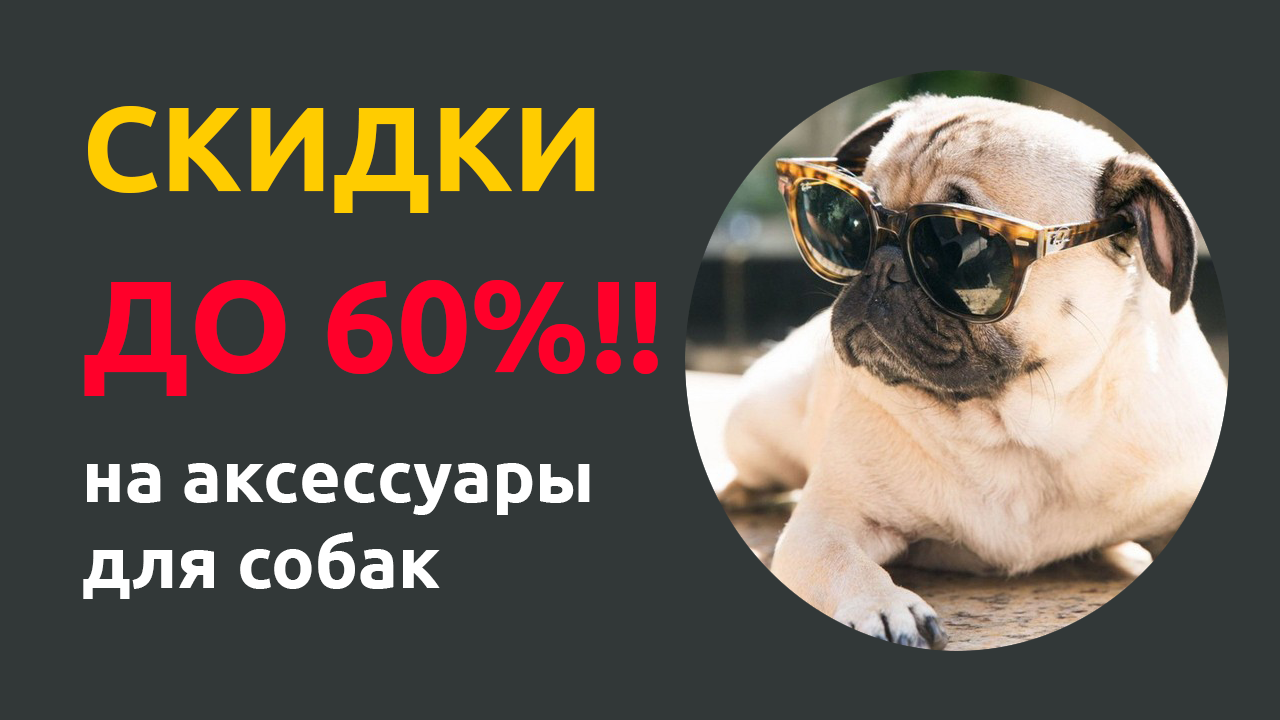
<style>
.page{position:relative;width:1280px;height:720px;background:#323838}
.page>*{position:absolute;margin:0}
.t1{font:120px "Ubuntu-Bold";color:#ffcc00}
.t2{font:130px "Ubuntu-Bold";color:#ff002a}
.t3{font:72px "Ubuntu-Bold";color:#ffffff}
</style>
<div class="page">
<p class="t1" style="left:88px;top:106px;width:507px;height:107px">СКИДКИ</p>
<p class="t2" style="left:84px;top:280px;width:574px;height:116px">ДО 60%!!</p>
<p class="t3" style="left:83px;top:463px;width:507px;height:136px">на аксессуары <br>для собак</p>
</div>
